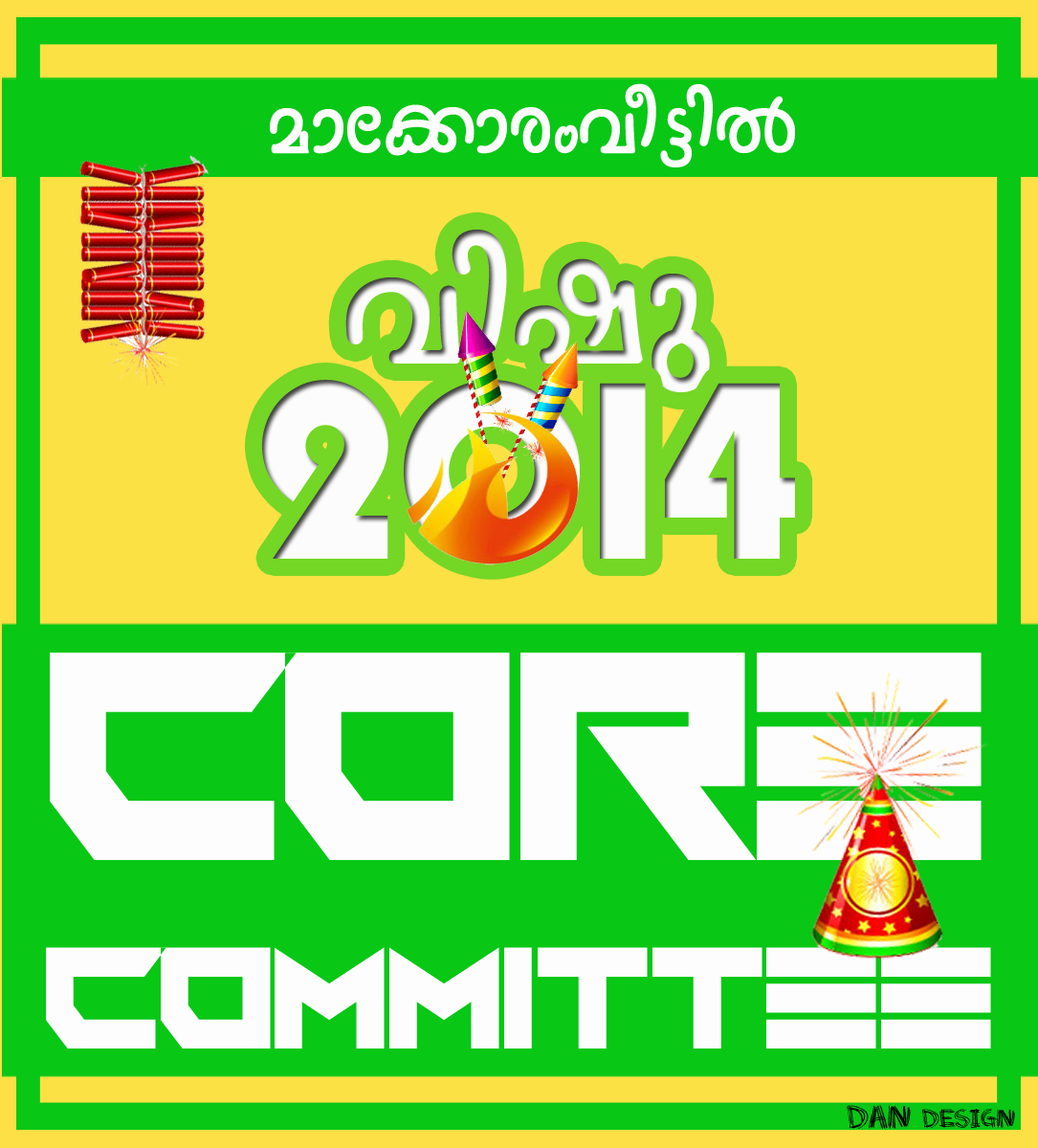
<style>
.page{position:relative;width:1038px;height:1148px;background:#08c715}
.page>*{position:absolute;margin:0}
.t1{font:104.9px "FML-Nanditha";color:#fdfdfd;scale:0.9 1}
.t2{font:204.6px "FML-Nanditha";color:#fcfcfc;scale:0.97 1}
.t3{font:263px "PumpDemiBoldLetPlain";color:#fcfcfc;scale:0.97 1}
.t4{font:147.8px/188px "FoughtKnightVictory";color:#fdfdfd;scale:0.76 1}
.t5{font:303.2px/188px "FoughtKnightVictory";color:#fdfdfd;scale:0.76 1}
.t6{font:18.6px "Scratchmyback";color:#000000}
.t7{font:23.3px "Scratchmyback";color:#000000}
</style>
<div class="page">
<p class="t1" style="left:270px;top:83px;width:525px;height:84px">amt¡mcwho«nÂ</p>
<p class="t2" style="left:345px;top:230px;width:365px;height:162px">hnjp</p>
<p class="t3" style="left:262px;top:380px;width:533px;height:183px">2014</p>
<p class="t4" style="left:46px;top:653px;width:945px;height:396px;text-align:center"><span class="t5">Core<br></span>Committee</p>
<p class="t6" style="left:847px;top:1105px;width:168px;height:24px"><span class="t7">Dan </span>Design</p>
</div>
